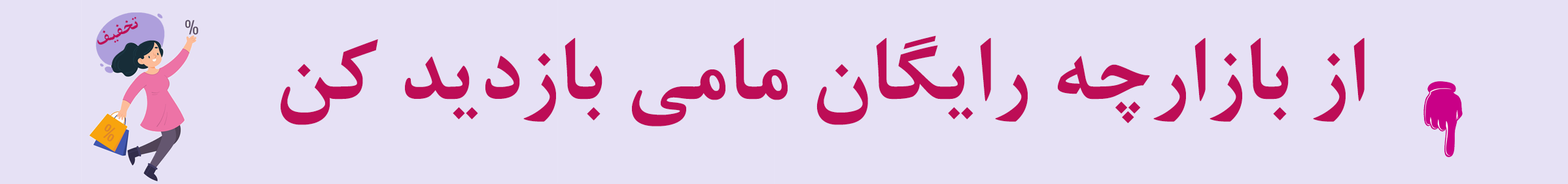
<style>
.page{position:relative;width:1568px;height:184px;background:#e6e1f5}
.page>*{position:absolute;margin:0}
.t1{font:19.6px "BNazaninBold";color:#bd0d56}
.t2{font:98.1px "BNazaninBold";color:#bd0d56}
</style>
<div class="page">
<p class="t1" style="left:97px;top:16px;width:41px;height:29px;rotate:-26deg">تخفیف</p>
<p class="t2" style="left:280px;top:35px;width:1085px;height:91px">از بازارچه رایگان مامی بازدید کن</p>
</div>
